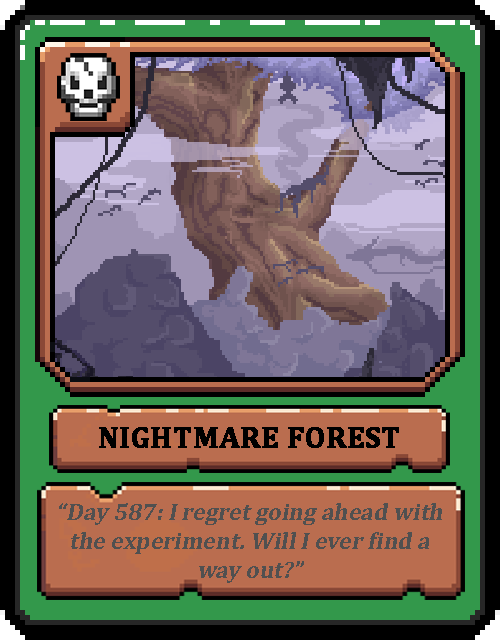
<style>
.page{position:relative;width:500px;height:640px}
.page>*{position:absolute;margin:0}
.t1{font:30px "Cambria-Bold";color:#000000;text-transform:uppercase;font-weight:bold}
.t2{font:24px "Cambria-Bold";color:#505050;font-style:italic}
</style>
<div class="page">
<p class="t1" style="left:99px;top:427px;width:300px;height:21px">Nightmare Forest</p>
<p class="t2" style="left:59px;top:503px;width:383px;height:80px;text-align:center">“Day 587: I regret going ahead with the experiment. Will I ever find a way out?”</p>
</div>
